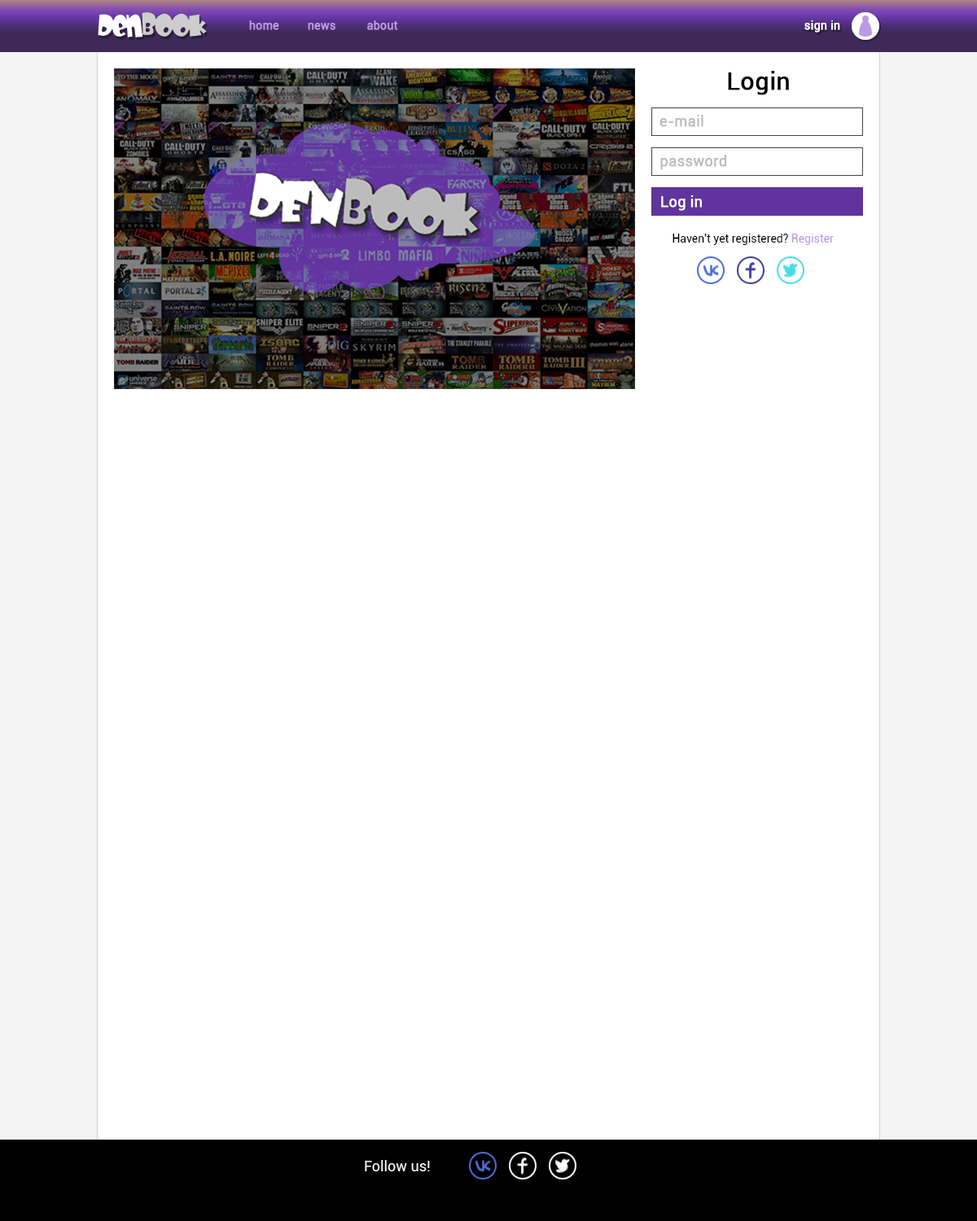
<style>
.page{position:relative;width:977px;height:1221px;background:#ffffff}
.page>*{position:absolute;margin:0}
.t1{font:11.4px "Roboto-Regular";color:#bc98e7;font-weight:bold}
.t2{font:11.4px "Roboto-Regular";color:#bb98e6;font-weight:bold}
.t3{font:11.4px "Roboto-Regular";color:#bc9ae6;font-weight:bold}
.t4{font:11.4px "Roboto-Regular";color:#ffffff;font-weight:bold}
.t5{font:24.4px "Roboto-Regular";color:#000000;font-weight:bold}
.t6{font:14.7px "Roboto-Regular";color:#ffffff;font-weight:bold}
.t7{font:11.4px "Roboto-Regular";color:#000000}
.t8{font:11.4px "Roboto-Regular";color:#bc9ae5}
</style>
<div class="page">
<p class="t1" style="left:249px;top:20px;width:30px;height:10px">home</p>
<p class="t2" style="left:308px;top:23px;width:27px;height:7px">news</p>
<p class="t3" style="left:367px;top:20px;width:31px;height:10px">about</p>
<p class="t4" style="left:804px;top:20px;width:36px;height:13px">sign in</p>
<p class="t4" style="left:804px;top:20px;width:36px;height:13px">sign in</p>
<p class="t5" style="left:728px;top:71px;width:61px;height:24px">Login</p>
<p class="t6" style="left:661px;top:195px;width:41px;height:16px">Log in</p>
<p class="t7" style="left:672px;top:234px;width:161px;height:11px">Haven't yet registered? <span class="t8">Register</span></p>
</div>
